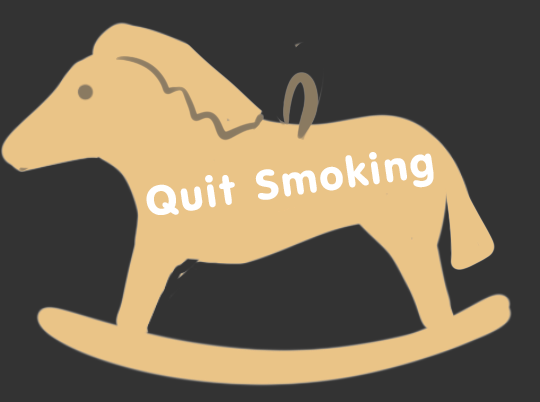
<style>
.page{position:relative;width:540px;height:402px;background:#333333}
.page>*{position:absolute;margin:0}
.t1{font:42.3px "NokiaSansS60-Bold";letter-spacing:0.08em;color:#ffffff}
</style>
<div class="page">
<p class="t1" style="left:146px;top:152px;width:288px;height:63px;rotate:-8deg">Quit Smoking</p>
</div>
